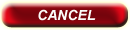
<style>
.page{position:relative;width:130px;height:30px}
.page>*{position:absolute;margin:0}
.t1{font:14px "Arial-BoldItalicMT";color:#fcfbf9}
</style>
<div class="page">
<p class="t1" style="left:38px;top:9px;width:58px;height:12px">CANCEL</p>
</div>
